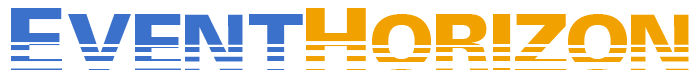
<style>
.page{position:relative;width:697px;height:76px;background:#ffffff}
.page>*{position:absolute;margin:0}
.t1{font:96px "VentilateAOE";color:#f1a200}
.t2{font:106.8px "VentilateAOE";color:#3b71ca}
.t3{font:96px "VentilateAOE";color:#3b71ca}
.t4{font:106.8px "VentilateAOE";color:#f1a200}
</style>
<div class="page">
<p class="t1" style="left:11px;top:8px;width:678px;height:62px"><span class="t2">E</span><span class="t3">vent</span><span class="t4">H</span>orizon</p>
</div>
